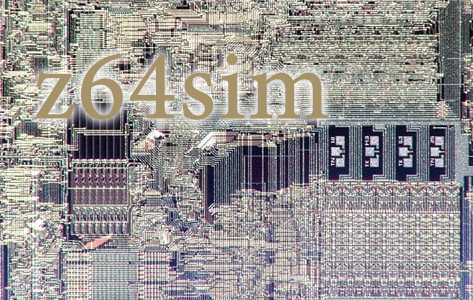
<style>
.page{position:relative;width:473px;height:300px}
.page>*{position:absolute;margin:0}
.t1{font:100px "MinionPro-Regular";color:#a79369;font-weight:bold}
</style>
<div class="page">
<p class="t1" style="left:35px;top:53px;width:293px;height:67px">z64sim</p>
</div>
